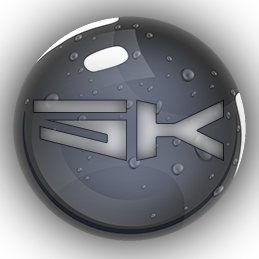
<style>
.page{position:relative;width:259px;height:259px}
.page>*{position:absolute;margin:0}
.t1{font:89.8px "Nero";letter-spacing:0.02em;scale:1.53 1}
</style>
<div class="page">
<p class="t1" style="left:32px;top:99px;width:192px;height:63px">SK</p>
</div>
